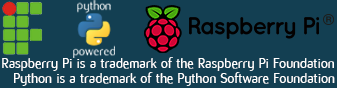
<style>
.page{position:relative;width:337px;height:88px;background:#133f52}
.page>*{position:absolute;margin:0}
.t1{font:14.7px "Flux";color:#ffffff}
</style>
<div class="page">
<p class="t1" style="left:2px;top:57px;width:332px;height:14px">Raspberry Pi is a trademark of the Raspberry Pi Foundation</p>
<p class="t1" style="left:14px;top:72px;width:321px;height:14px">Python is a trademark of the Python Software Foundation</p>
</div>
